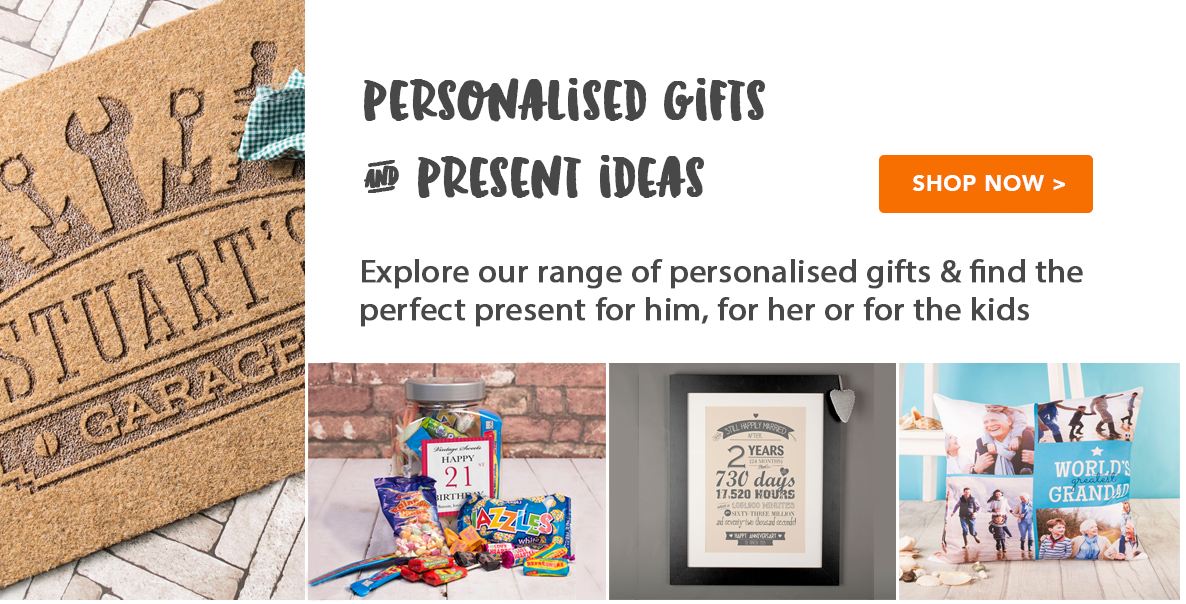
<style>
.page{position:relative;width:1186px;height:604px;background:#ffffff}
.page>*{position:absolute;margin:0}
.t1{font:64px "InkBanditsSans-Regular";color:#484848;font-weight:bold}
.t2{font:32px "MyriadPro-Regular";color:#484848;font-weight:bold;scale:1.05 1}
</style>
<div class="page">
<p class="t1" style="left:364px;top:78px;width:401px;height:121px">personalised gifts<br>&amp; present ideas</p>
<p class="t2" style="left:361px;top:259px;width:722px;height:68px">Explore our range of personalised gifts &amp; find the <br>perfect present for him, for her or for the kids</p>
</div>
